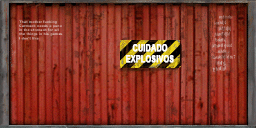
<style>
.page{position:relative;width:256px;height:128px}
.page>*{position:absolute;margin:0}
.t1{font:10px "Arial-BoldMT";letter-spacing:0.01em;color:#ffffff;font-weight:bold;scale:0.71 1}
</style>
<div class="page">
<p class="t1" style="left:126px;top:44px;width:48px;height:19px;text-align:center">CUIDADO<br>EXPLOSIVOS</p>
</div>
